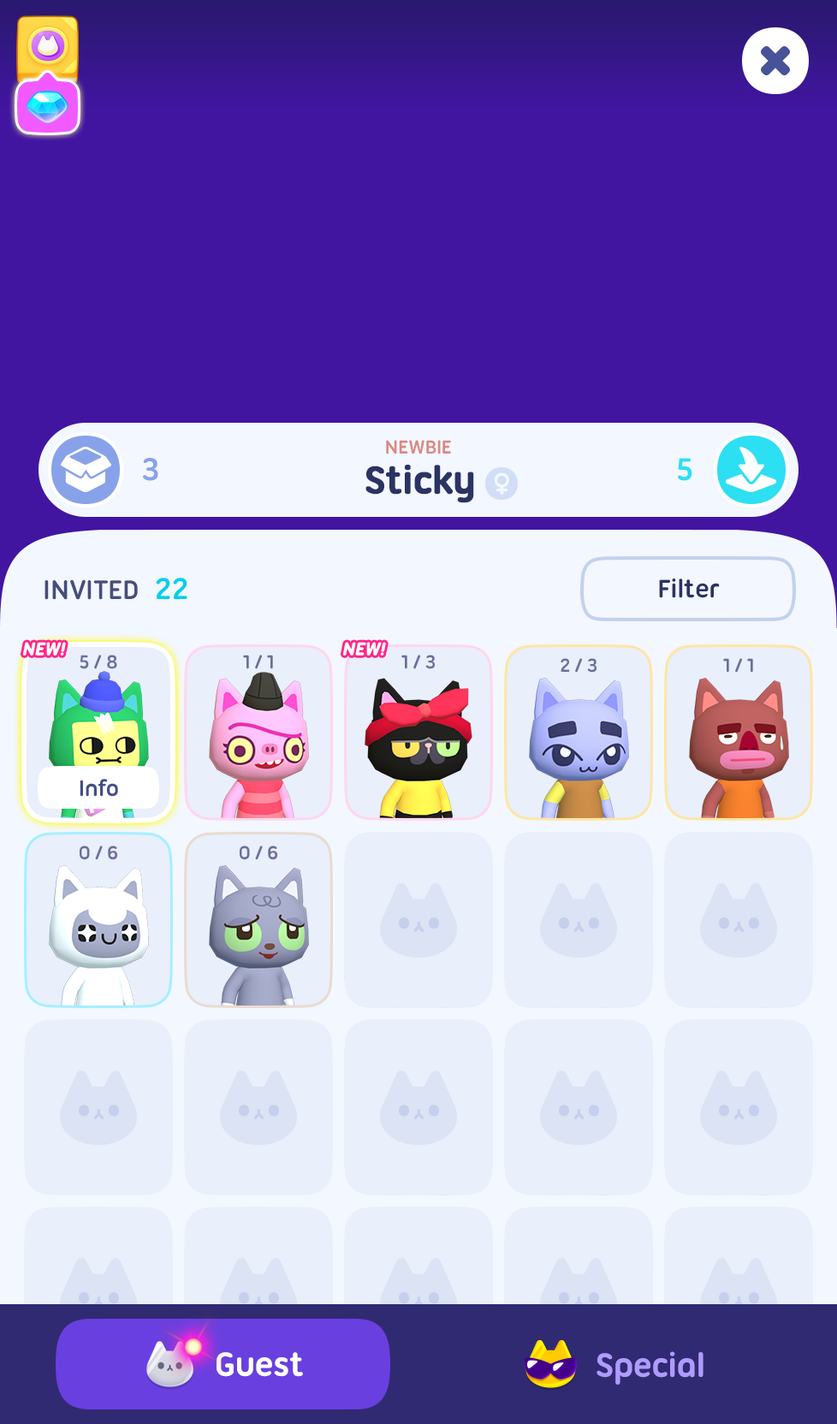
<style>
.page{position:relative;width:837px;height:1424px;background:#e9effb}
.page>*{position:absolute;margin:0}
.t1{font:20.5px "UbuntuTitling-Bold";letter-spacing:-0.025em;color:#db8982;text-transform:uppercase}
.t2{font:34.2px "UbuntuTitling-Bold";letter-spacing:-0.025em;color:#88a2ea;text-transform:uppercase}
.t3{font:34.2px "UbuntuTitling-Bold";letter-spacing:-0.025em;color:#2ddff2;text-transform:uppercase}
.t4{font:41.1px "UbuntuTitling-Bold";letter-spacing:-0.025em;color:#2a3362;font-weight:bold}
.t5{font:29.1px "UbuntuTitling-Bold";letter-spacing:-0.025em;color:#454e7b;text-transform:uppercase}
.t6{font:32.5px "UbuntuTitling-Bold";letter-spacing:-0.025em;color:#00d0e9;text-transform:uppercase}
.t7{font:27.4px "UbuntuTitling-Bold";letter-spacing:-0.025em;color:#2a3362}
.t8{font:18.8px "UbuntuTitling-Bold";letter-spacing:-0.03em;color:#ffffff;text-transform:uppercase;font-weight:bold;font-style:italic}
.t9{font:20.5px "UbuntuTitling-Bold";letter-spacing:-0.025em;color:#687198}
.t10{font:24px "UbuntuTitling-Bold";letter-spacing:-0.025em;color:#444f88}
.t11{font:36px "UbuntuTitling-Bold";letter-spacing:-0.025em;color:#ffffff}
.t12{font:36px "UbuntuTitling-Bold";letter-spacing:-0.025em;color:#af9bff}
</style>
<div class="page">
<p class="t1" style="left:386px;top:440px;width:65px;height:15px">Newbie</p>
<p class="t2" style="left:143px;top:458px;width:15px;height:23px">3</p>
<p class="t3" style="left:678px;top:458px;width:14px;height:23px">5</p>
<p class="t4" style="left:366px;top:465px;width:108px;height:38px">Sticky</p>
<p class="t5" style="left:45px;top:578px;width:142px;height:22px">Invited  <span class="t6">22</span></p>
<p class="t7" style="left:659px;top:579px;width:61px;height:19px">Filter</p>
<p class="t8" style="left:23px;top:642px;width:43px;height:14px">New!</p>
<p class="t8" style="left:343px;top:642px;width:43px;height:14px">New!</p>
<p class="t9" style="left:80px;top:655px;width:37px;height:14px">5 / 8</p>
<p class="t9" style="left:243px;top:655px;width:30px;height:14px">1 / 1</p>
<p class="t9" style="left:401px;top:655px;width:34px;height:14px">1 / 3</p>
<p class="t9" style="left:561px;top:658px;width:36px;height:15px">2 / 3</p>
<p class="t9" style="left:723px;top:658px;width:30px;height:15px">1 / 1</p>
<p class="t10" style="left:80px;top:779px;width:38px;height:18px">Info</p>
<p class="t9" style="left:80px;top:846px;width:37px;height:14px">0 / 6</p>
<p class="t9" style="left:240px;top:846px;width:37px;height:14px">0 / 6</p>
<p class="t11" style="left:217px;top:1352px;width:86px;height:25px">Guest</p>
<p class="t12" style="left:597px;top:1352px;width:107px;height:33px">Special</p>
</div>
